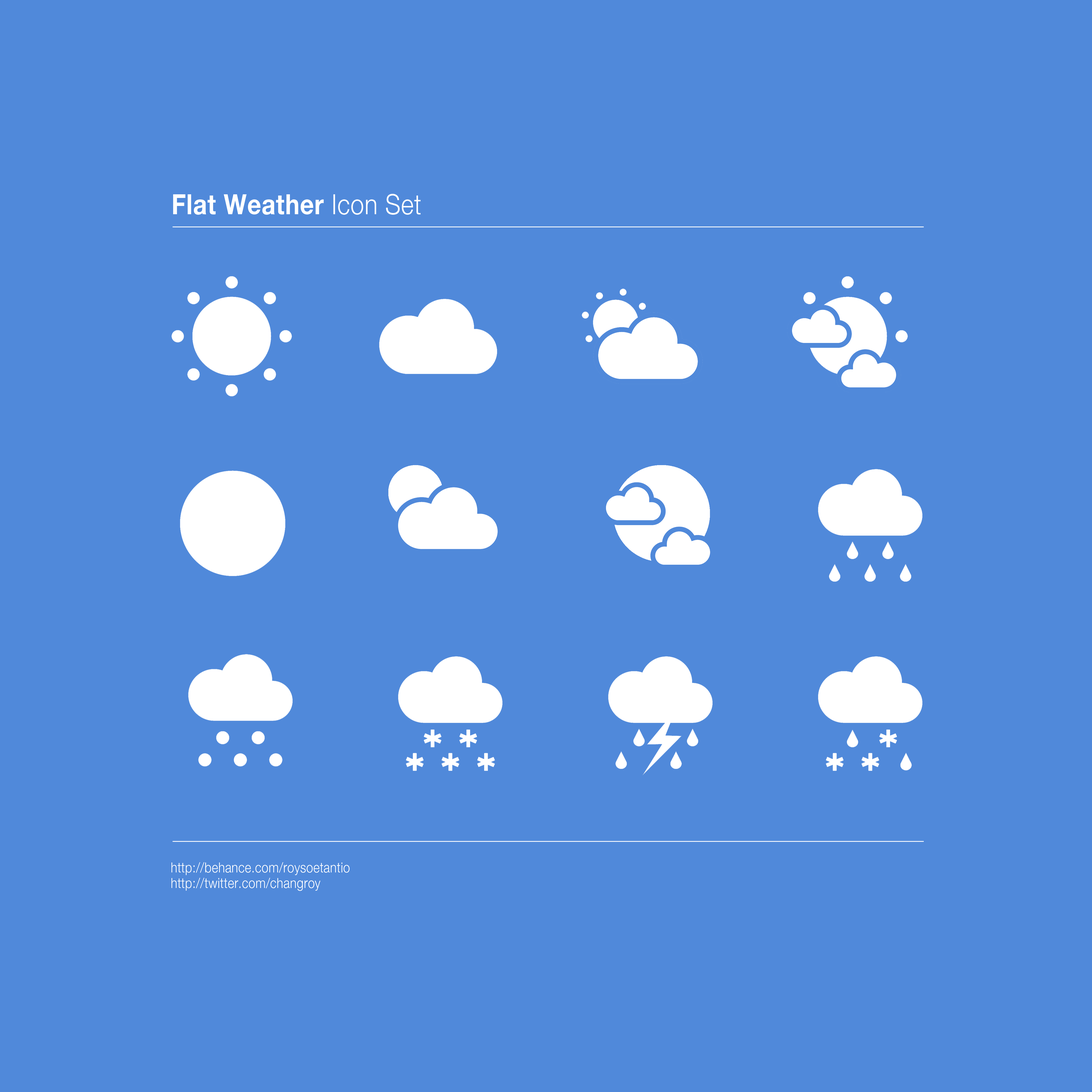
<style>
.page{position:relative;width:1092px;height:1092px;background:#5089da}
.page>*{position:absolute;margin:0}
.t1{font:27.9px "HelveticaNeue-Bold";letter-spacing:0.02em;color:#ffffff;scale:0.87 1}
.t2{font:27.9px "HelveticaNeue-Light";letter-spacing:0.02em;color:#ffffff;scale:0.87 1}
.t3{font:14px/15.6px "HelveticaNeue-Light";letter-spacing:0.02em;color:#ffffff;scale:0.87 1}
</style>
<div class="page">
<p class="t1" style="left:173px;top:194px;width:248px;height:21px">Flat Weather <span class="t2">Icon Set</span></p>
<p class="t3" style="left:171px;top:862px;width:179px;height:29px">http://behance.com/roysoetantio<br>http://twitter.com/changroy</p>
</div>
